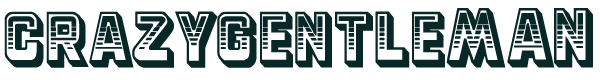
<style>
.page{position:relative;width:600px;height:80px;background:#ffffff}
.page>*{position:absolute;margin:0}
.t1{font:73.3px "Simson";color:#082727;font-weight:bold;scale:0.91 1}
.t2{font:77.9px "Simson";color:#082727;font-weight:bold;scale:0.91 1}
</style>
<div class="page">
<p class="t1" style="left:4px;top:8px;width:589px;height:60px">CRAZYGENTLE<span class="t2">MAN</span></p>
</div>
